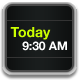
<style>
.page{position:relative;width:79px;height:80px}
.page>*{position:absolute;margin:0}
.t1{font:12px/13px "HelveticaNeue-Bold";color:#ffffff}
.t2{font:14px/13px "HelveticaNeue-Bold";color:#ccff00}
</style>
<div class="page">
<p class="t1" style="left:10px;top:27px;width:57px;height:24px"><span class="t2">Today<br>   </span>9:30 AM</p>
</div>
